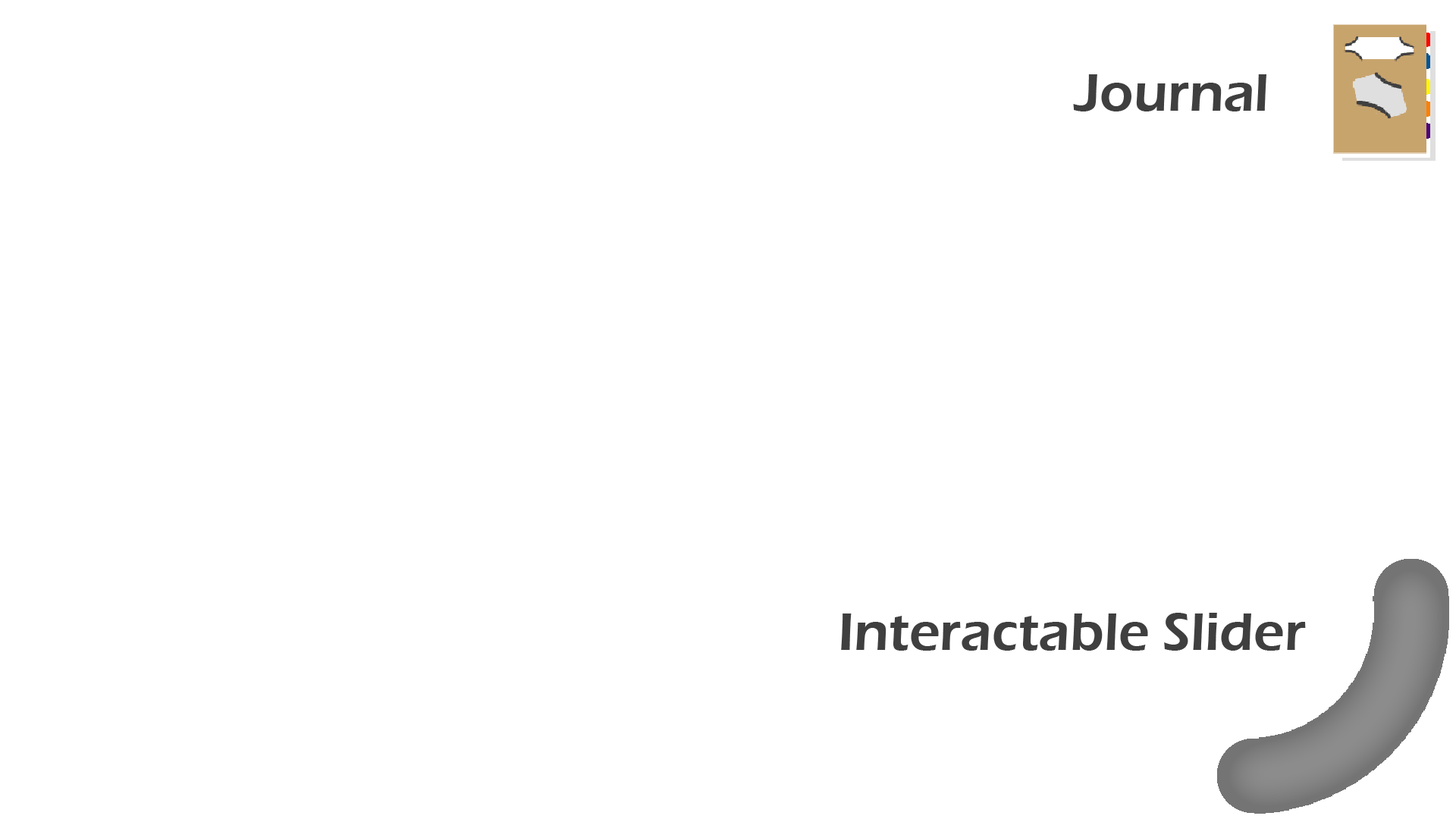
<style>
.page{position:relative;width:1456px;height:819px;background:#ffffff}
.page>*{position:absolute;margin:0}
.t1{font:54.6px "ErasITC-Demi";color:#3f3f3f}
</style>
<div class="page">
<p class="t1" style="left:1073px;top:74px;width:193px;height:37px">Journal</p>
<p class="t1" style="left:841px;top:613px;width:465px;height:38px">Interactable Slider</p>
</div>
